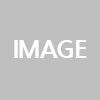
<style>
.page{position:relative;width:100px;height:100px;background:#bfbfbf}
.page>*{position:absolute;margin:0}
.t1{font:24px "NanumGothicExtraBold";letter-spacing:-0.05em;color:#ffffff;text-transform:uppercase}
</style>
<div class="page">
<p class="t1" style="left:14px;top:40px;width:73px;height:18px">image</p>
</div>
